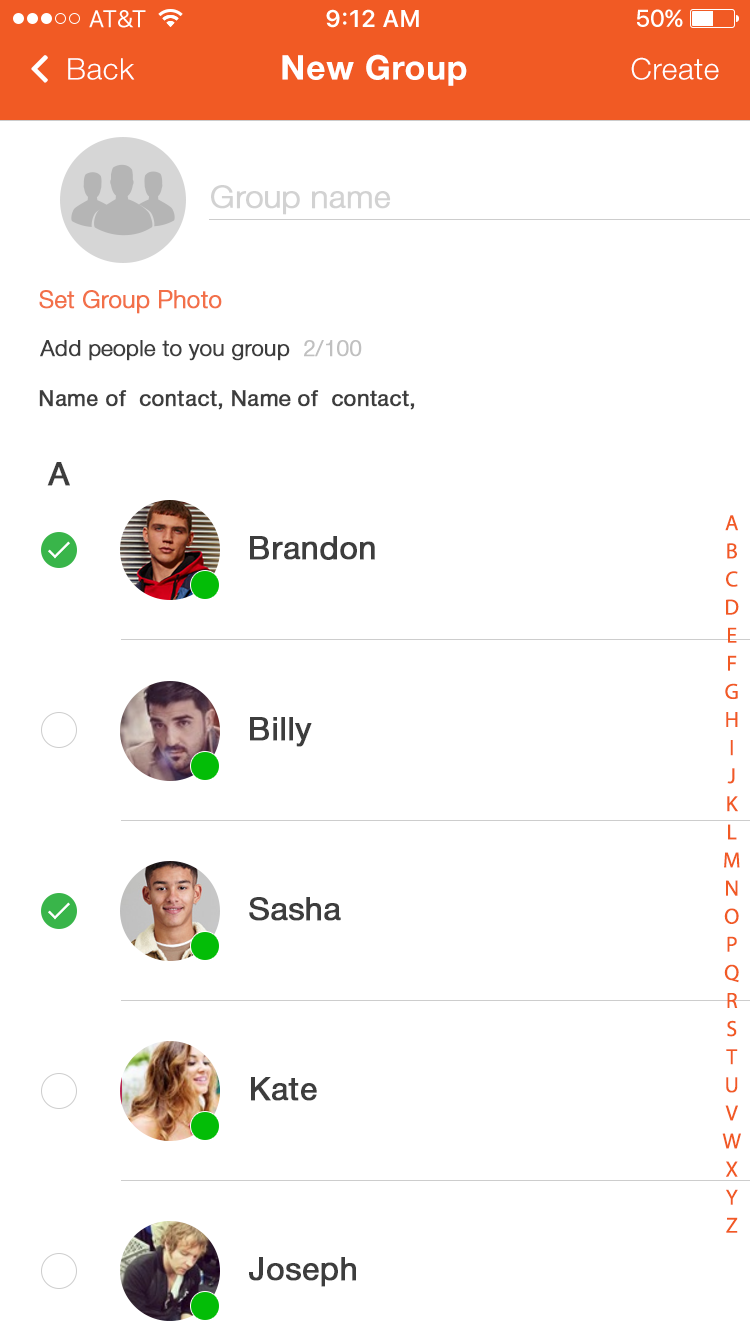
<style>
.page{position:relative;width:750px;height:1334px;background:#ffffff}
.page>*{position:absolute;margin:0}
.t1{font:34px "HelveticaNeueCyr-Bold";letter-spacing:0.02em;color:#ffffff}
.t2{font:30px "HelveticaNeueCyr-Light";letter-spacing:0.02em;color:#ffffff}
.t3{font:32px "HelveticaNeueCyr-Light";color:#cdcdcd;font-weight:bold}
.t4{font:24px "HelveticaNeueCyr-Light";color:#f27049;font-weight:bold}
.t5{font:22px "HelveticaNeueCyr-Light";color:#3d3d3d;font-weight:bold}
.t6{font:22px "HelveticaNeueCyr-Light";color:#c0c0c0;font-weight:bold}
.t7{font:22px "HelveticaNeueCyr-Roman";color:#3d3d3d;font-weight:bold}
.t8{font:32px "HelveticaNeueCyr-Roman";color:#3d3d3d;font-weight:bold}
.t9{font:22px/28.1px "MyriadPro-Regular";color:#f15a24}
</style>
<div class="page">
<p class="t1" style="left:282px;top:54px;width:185px;height:32px">New Group</p>
<p class="t2" style="left:68px;top:58px;width:67px;height:22px">Back</p>
<p class="t2" style="left:631px;top:57px;width:88px;height:23px">Create</p>
<p class="t3" style="left:211px;top:185px;width:180px;height:30px;opacity:0.9">Group name</p>
<p class="t4" style="left:39px;top:290px;width:183px;height:24px">Set Group Photo</p>
<p class="t5" style="left:40px;top:340px;width:322px;height:21px">Add people to you group <span class="t6"> 2/100</span></p>
<p class="t7" style="left:39px;top:390px;width:376px;height:20px">Name of  contact, Name of  contact,</p>
<p class="t8" style="left:47px;top:462px;width:23px;height:24px">A</p>
<p class="t9" style="left:722px;top:515px;width:19px;height:718px;text-align:center">A<br>B<br>C<br>D<br>E<br>F<br>G<br>H<br>I<br>J<br>K<br>L<br>M<br>N<br>O<br>P<br>Q<br>R<br>S<br>T<br>U<br>V<br>W<br>X<br>Y<br>Z</p>
<p class="t8" style="left:250px;top:536px;width:125px;height:24px">Brandon</p>
<p class="t8" style="left:250px;top:717px;width:62px;height:30px">Billy</p>
<p class="t8" style="left:249px;top:897px;width:92px;height:24px">Sasha</p>
<p class="t8" style="left:251px;top:1077px;width:66px;height:24px">Kate</p>
<p class="t8" style="left:249px;top:1257px;width:107px;height:30px">Joseph</p>
</div>
